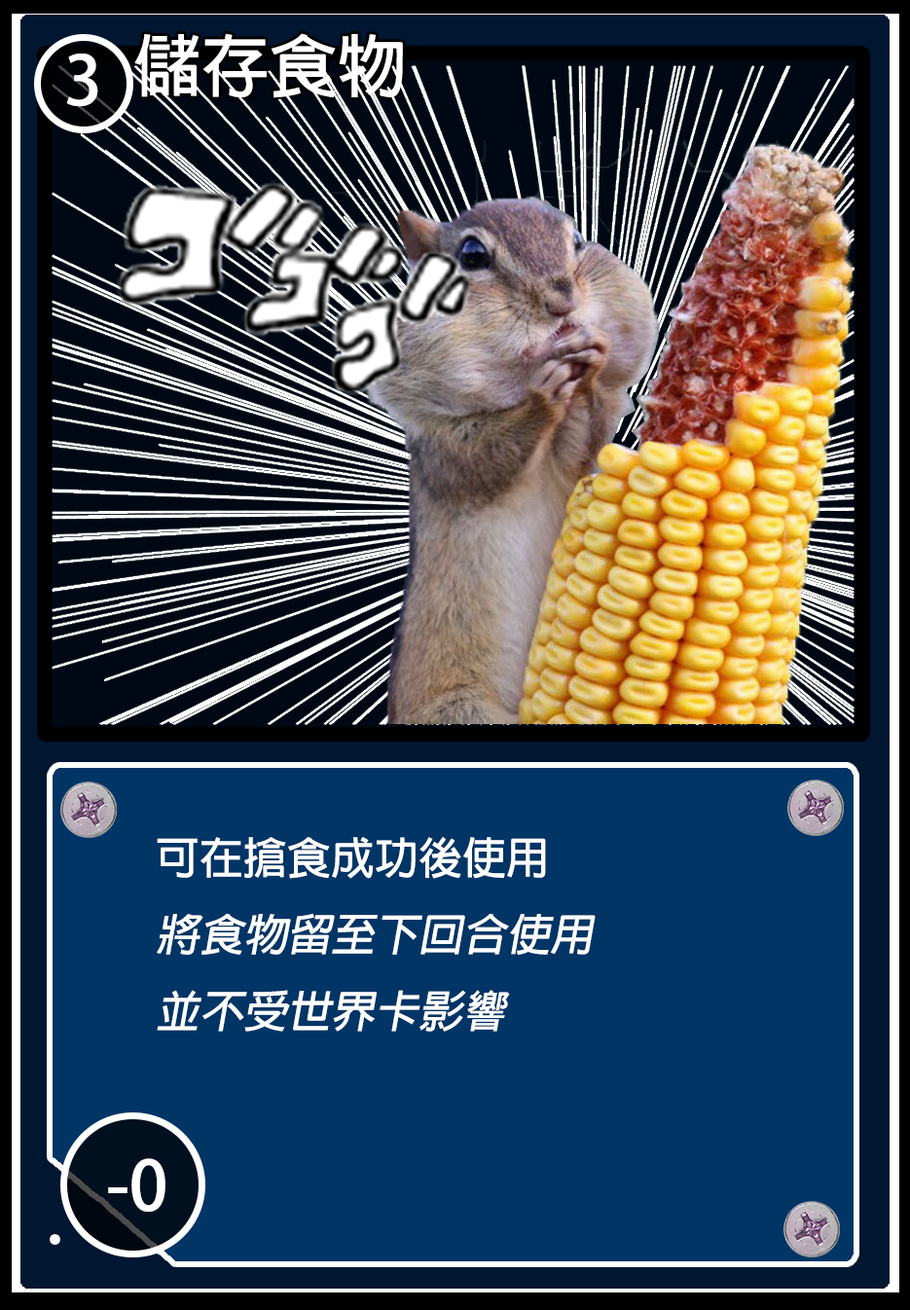
<style>
.page{position:relative;width:910px;height:1310px;background:#003566}
.page>*{position:absolute;margin:0}
.t1{font:68.1px "AdobeFanHeitiStd-Bold";color:#ffffff}
.t2{font:67.8px "AdobeFanHeitiStd-Bold";color:#ffffff}
.t3{font:43.8px "AdobeFanHeitiStd-Bold";color:#ffffff;font-style:italic}
.t4{font:43.8px "AdobeFanHeitiStd-Bold";color:#ffffff}
</style>
<div class="page">
<p class="t1" style="left:134px;top:33px;width:269px;height:65px">儲存食物</p>
<p class="t2" style="left:66px;top:54px;width:32px;height:53px">3</p>
<p class="t3" style="left:157px;top:837px;width:439px;height:195px"><span class="t4">可在搶食成功後使用<br></span>將食物留至下回合使用<br>並不受世界卡影響</p>
<p class="t1" style="left:108px;top:1158px;width:57px;height:54px">-0</p>
</div>
